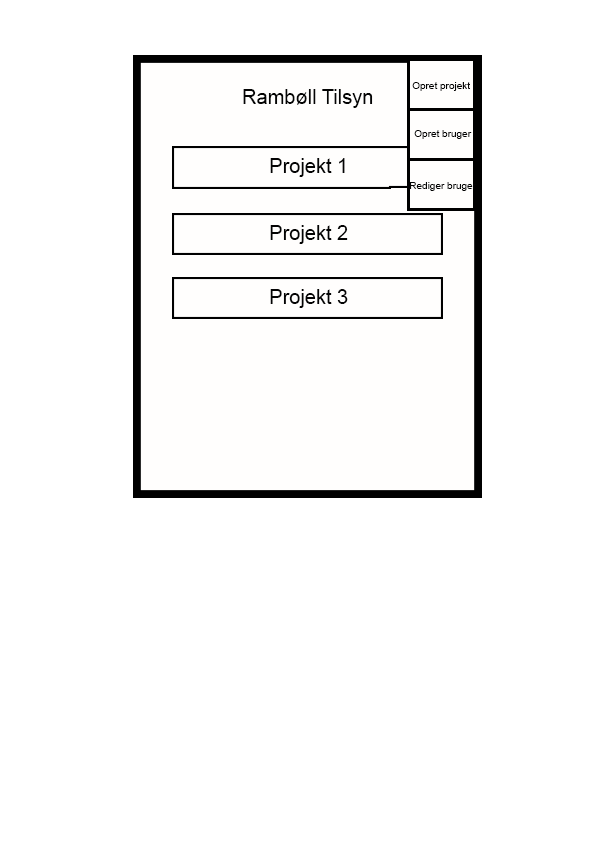
<style>
.page{position:relative;width:595px;height:842px;background:#ffffff}
.page>*{position:absolute;margin:0}
.t1{font:20px "ArialMT";color:#040404}
.t2{font:10px "ArialMT";color:#040404}
</style>
<div class="page">
<p class="t1" style="left:243px;top:89px;width:130px;height:19px">Rambøll Tilsyn</p>
<p class="t2" style="left:412px;top:82px;width:58px;height:9px">Opret projekt</p>
<p class="t2" style="left:414px;top:130px;width:58px;height:9px">Opret bruger</p>
<p class="t1" style="left:270px;top:158px;width:75px;height:19px">Projekt 1</p>
<p class="t2" style="left:409px;top:182px;width:68px;height:9px">Rediger bruger</p>
<p class="t1" style="left:270px;top:225px;width:78px;height:19px">Projekt 2</p>
<p class="t1" style="left:270px;top:289px;width:78px;height:19px">Projekt 3</p>
</div>
